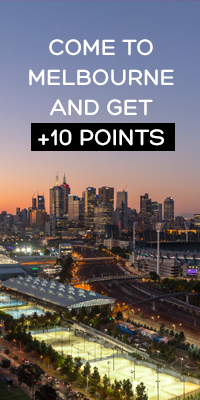
<style>
.page{position:relative;width:200px;height:400px}
.page>*{position:absolute;margin:0}
.t1{font:24px/30px "HotelsSansWeb";color:#ffffff;text-transform:uppercase}
</style>
<div class="page">
<p class="t1" style="left:29px;top:39px;width:145px;height:107px;text-align:center">come to<br>melbourne<br>and get<br>+10 points</p>
</div>
